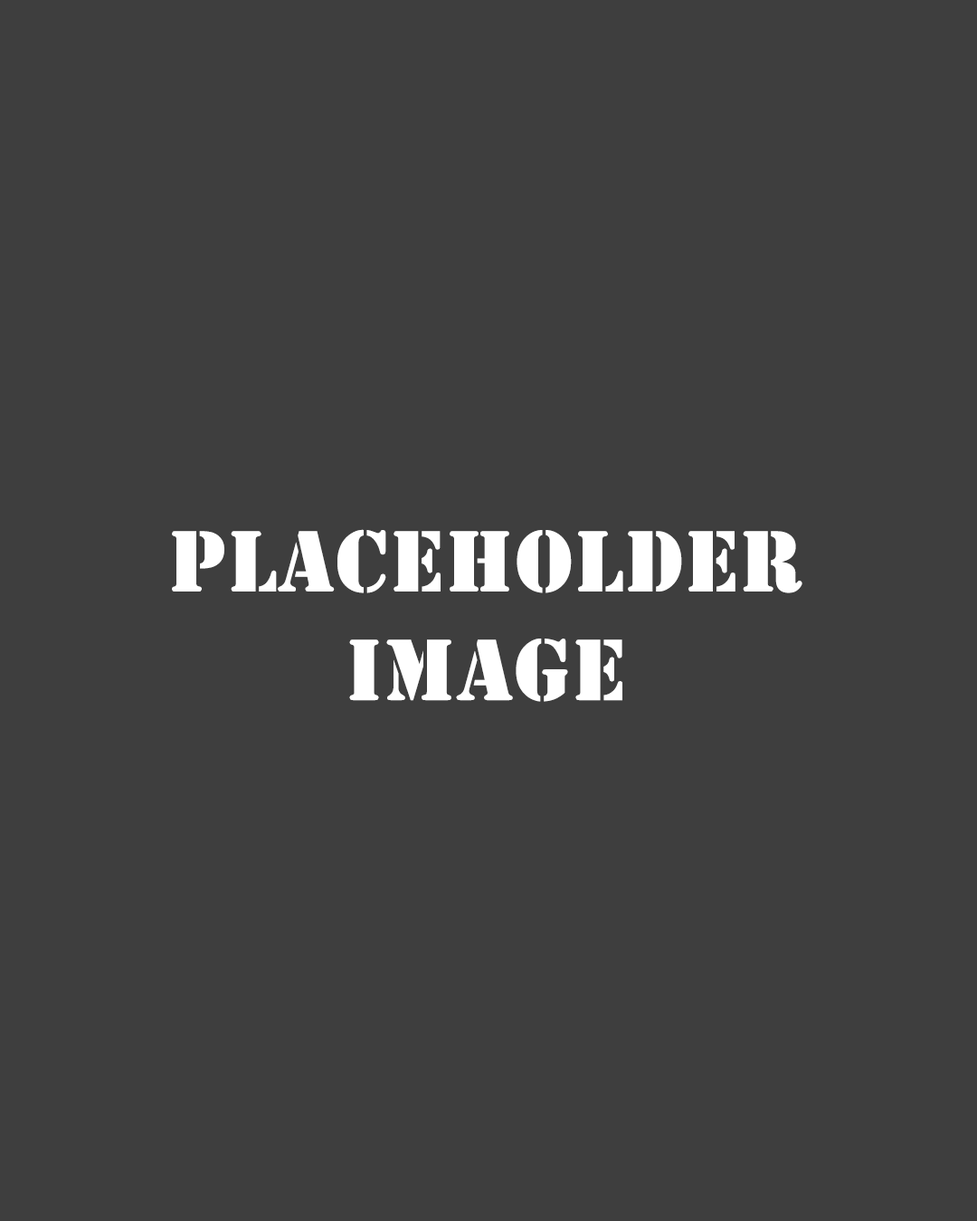
<style>
.page{position:relative;width:977px;height:1221px;background:#3e3e3e}
.page>*{position:absolute;margin:0}
.t1{font:90.4px "Stencil";letter-spacing:0.02em;color:#ffffff}
</style>
<div class="page">
<p class="t1" style="left:172px;top:529px;width:630px;height:173px;text-align:center">Placeholder<br>Image</p>
</div>
